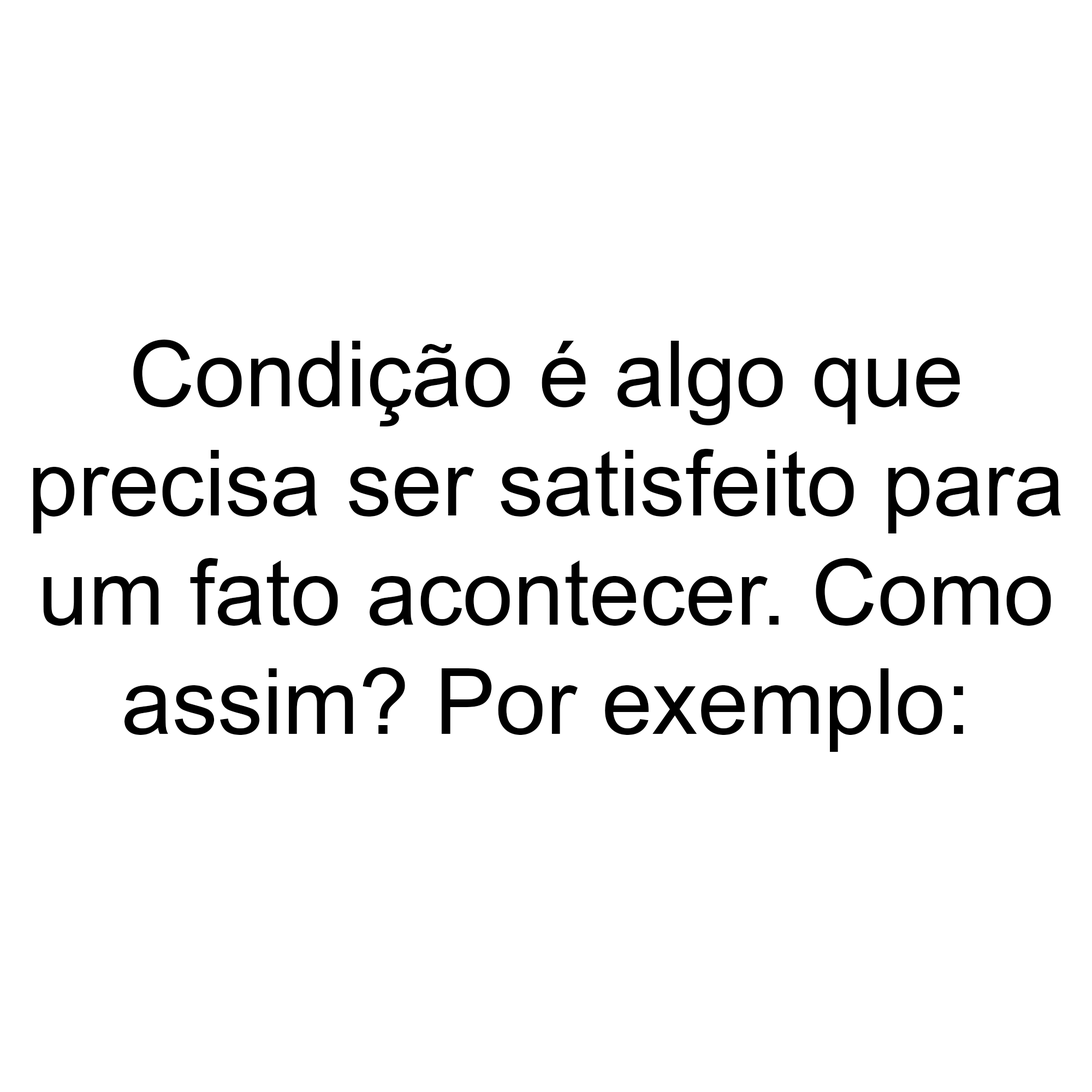
<style>
.page{position:relative;width:1092px;height:1092px;background:#ffffff}
.page>*{position:absolute;margin:0}
.t1{font:91px "ArialMT";color:#000000}
</style>
<div class="page">
<p class="t1" style="left:33px;top:340px;width:1028px;height:412px;text-align:center">Condição é algo que<br>precisa ser satisfeito para<br>um fato acontecer. Como<br>assim? Por exemplo:</p>
</div>
